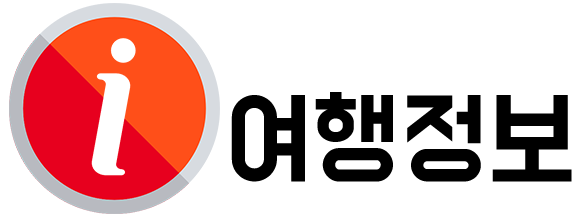
<style>
.page{position:relative;width:576px;height:216px;background:#ffffff}
.page>*{position:absolute;margin:0}
.t1{font:91.4px "BMDoHyeon";color:#000000}
</style>
<div class="page">
<p class="t1" style="left:231px;top:92px;width:341px;height:90px">여행정보</p>
</div>
